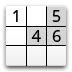
<style>
.page{position:relative;width:72px;height:72px;background:#ffffff}
.page>*{position:absolute;margin:0}
.t1{font:17px "DroidSans";color:#000000}
</style>
<div class="page">
<p class="t1" style="left:13px;top:10px;width:5px;height:12px">1</p>
<p class="t1" style="left:52px;top:10px;width:9px;height:12px">5</p>
<p class="t1" style="left:31px;top:30px;width:10px;height:12px">4</p>
<p class="t1" style="left:52px;top:30px;width:9px;height:12px">6</p>
</div>
